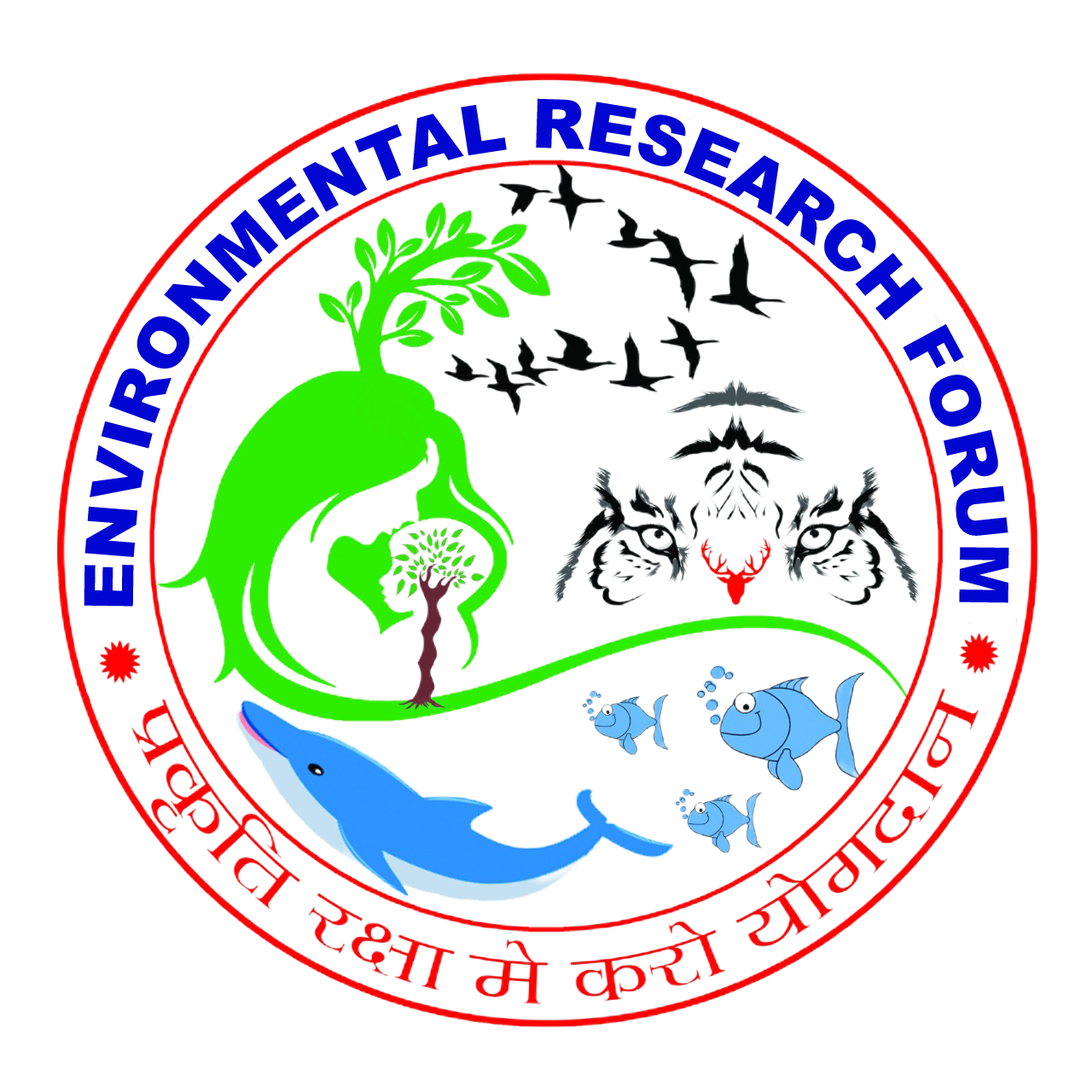
<style>
.page{position:relative;width:1092px;height:1092px;background:#ffffff}
.page>*{position:absolute;margin:0}
.t1{font:67.9px/33px "Arial-Black";color:#0206d1;text-transform:uppercase}
</style>
<div class="page">
<p class="t1" style="left:84px;top:98px;width:925px;height:509px;text-align:center">Environmental research forum</p>
</div>
